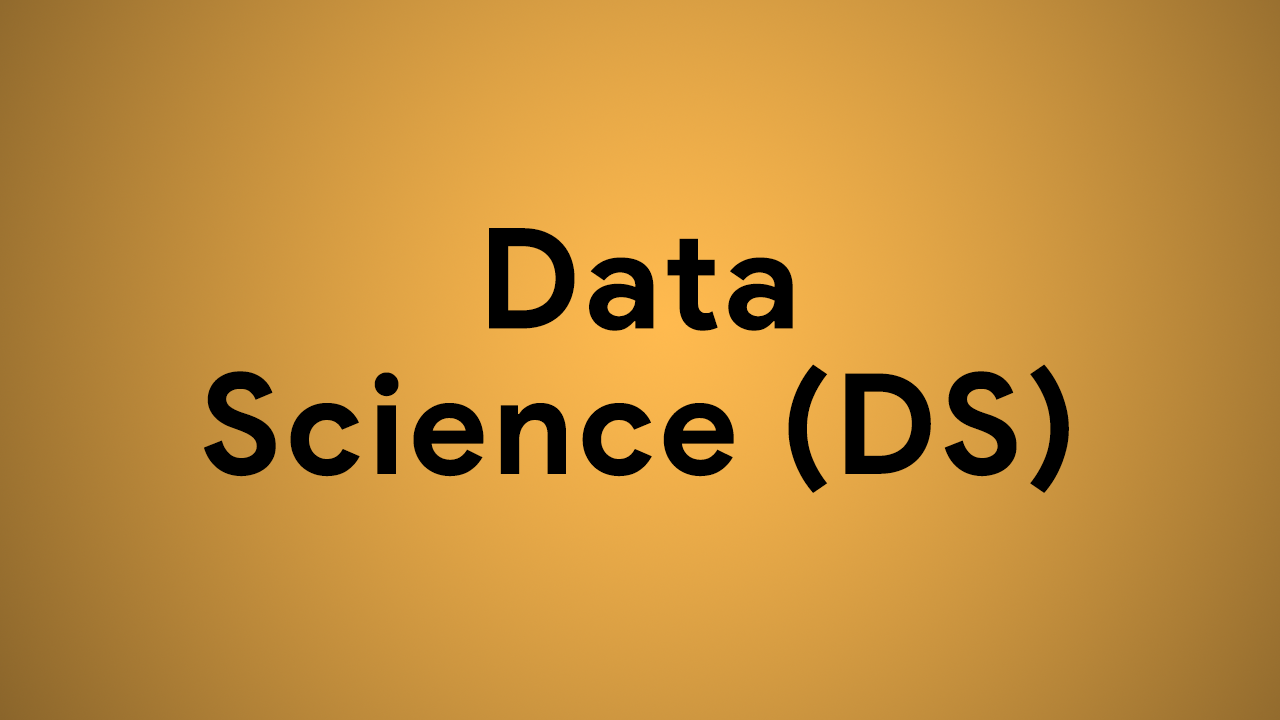
<style>
.page{position:relative;width:1280px;height:720px}
.page>*{position:absolute;margin:0}
.t1{font:139.8px/145.4px "ProductSans-Bold";letter-spacing:0.04em;color:#000000}
</style>
<div class="page">
<p class="t1" style="left:204px;top:228px;width:865px;height:265px;text-align:center">Data<br>Science (DS)</p>
</div>
